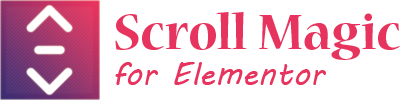
<style>
.page{position:relative;width:400px;height:100px;background:#ffffff}
.page>*{position:absolute;margin:0}
.t1{font:55.3px "NuevaStd-Bold";color:#e6345e;scale:0.96 1}
.t2{font:32.2px "MVBoli";color:#e6345e}
</style>
<div class="page">
<p class="t1" style="left:115px;top:12px;width:285px;height:48px">Scroll Magic</p>
<p class="t2" style="left:115px;top:62px;width:211px;height:23px">for Elementor</p>
</div>
